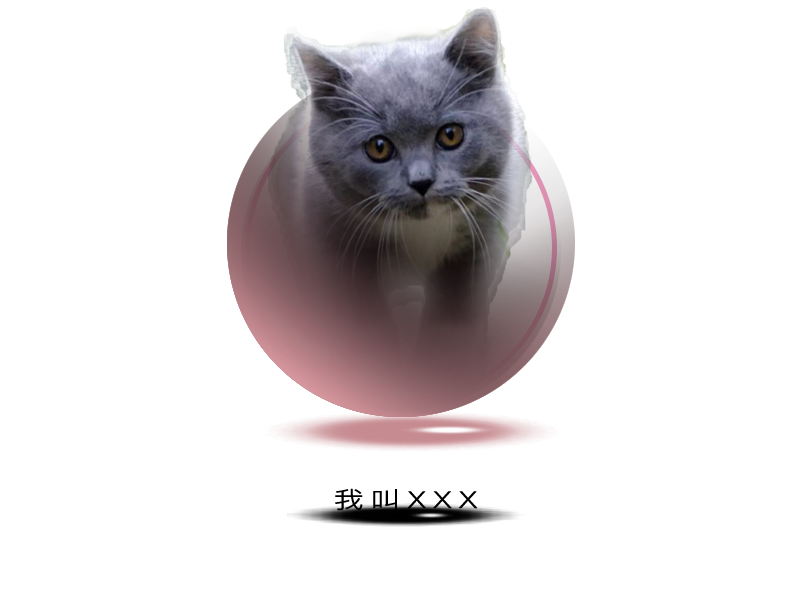
<style>
.page{position:relative;width:800px;height:600px;background:#ffffff}
.page>*{position:absolute;margin:0}
.t1{font:23.3px "PingFang-SC-Regular";letter-spacing:0.22em;color:#000000;font-weight:bold;scale:1.27 1}
</style>
<div class="page">
<p class="t1" style="left:335px;top:488px;width:143px;height:23px">我叫XXX</p>
</div>
